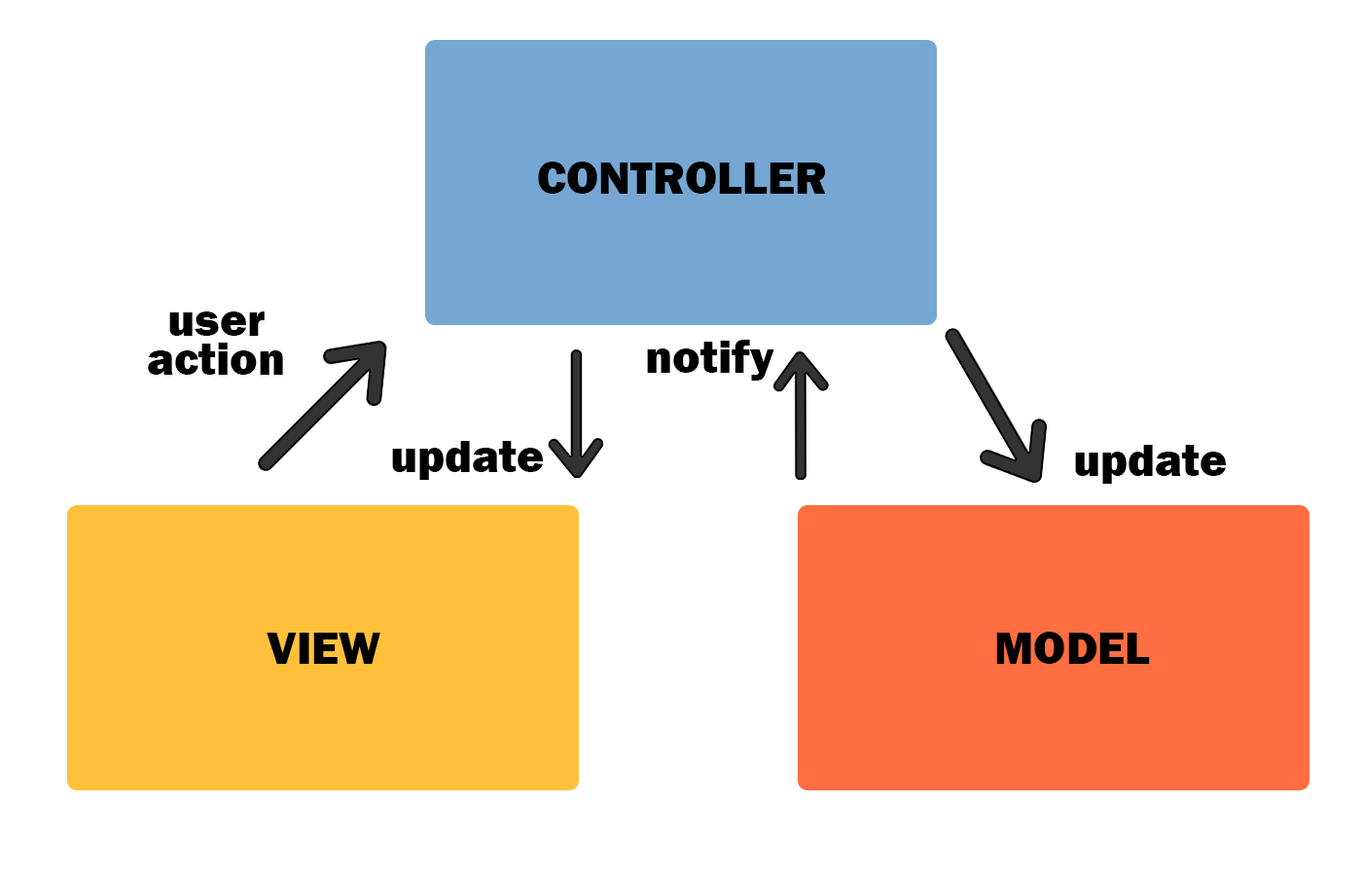
<style>
.page{position:relative;width:1362px;height:876px;background:#ffffff}
.page>*{position:absolute;margin:0}
.t1{font:46.7px "FranklinGothic-Heavy";color:#000000}
.t2{font:46.7px/38.9px "FranklinGothic-Heavy";color:#000000}
</style>
<div class="page">
<p class="t1" style="left:538px;top:161px;width:288px;height:33px">CONTROLLER</p>
<p class="t2" style="left:148px;top:311px;width:135px;height:64px;text-align:center">user<br>action</p>
<p class="t1" style="left:647px;top:340px;width:127px;height:40px">notify</p>
<p class="t1" style="left:392px;top:441px;width:151px;height:39px">update</p>
<p class="t1" style="left:1075px;top:445px;width:151px;height:38px">update</p>
<p class="t1" style="left:267px;top:632px;width:113px;height:31px">VIEW</p>
<p class="t1" style="left:996px;top:631px;width:154px;height:32px">MODEL</p>
</div>
